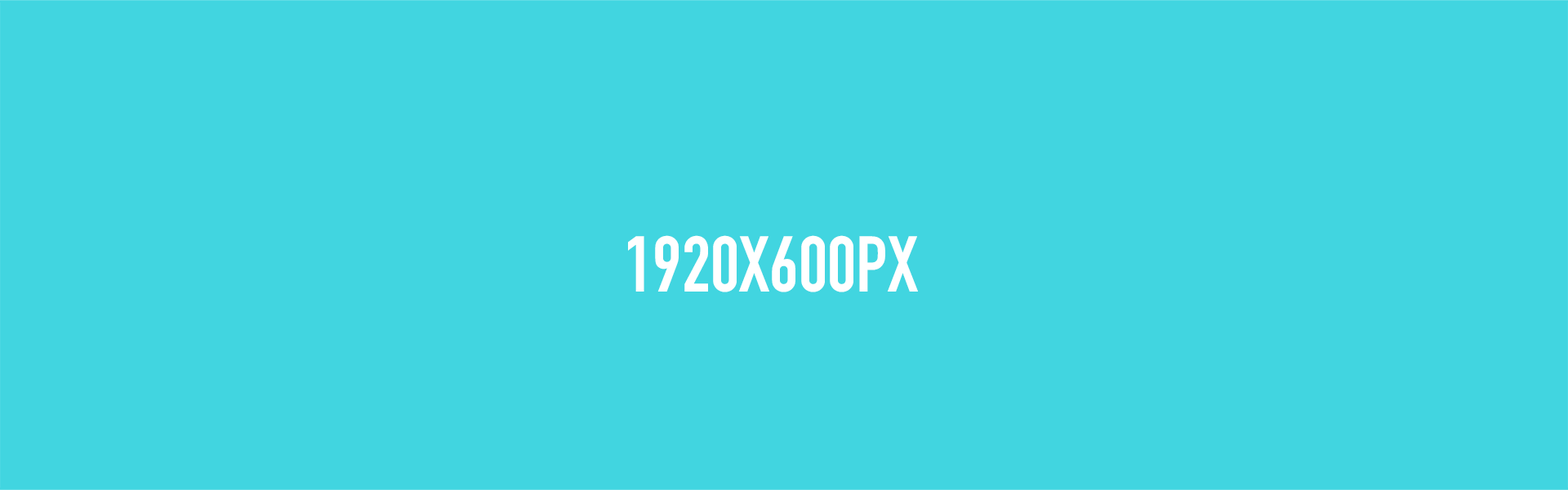
<style>
.page{position:relative;width:1568px;height:490px;background:#41d5e0}
.page>*{position:absolute;margin:0}
.t1{font:77.6px "DINCondensed-Bold";color:#ffffff;text-transform:uppercase}
</style>
<div class="page">
<p class="t1" style="left:628px;top:235px;width:290px;height:57px">1920X600PX</p>
</div>
